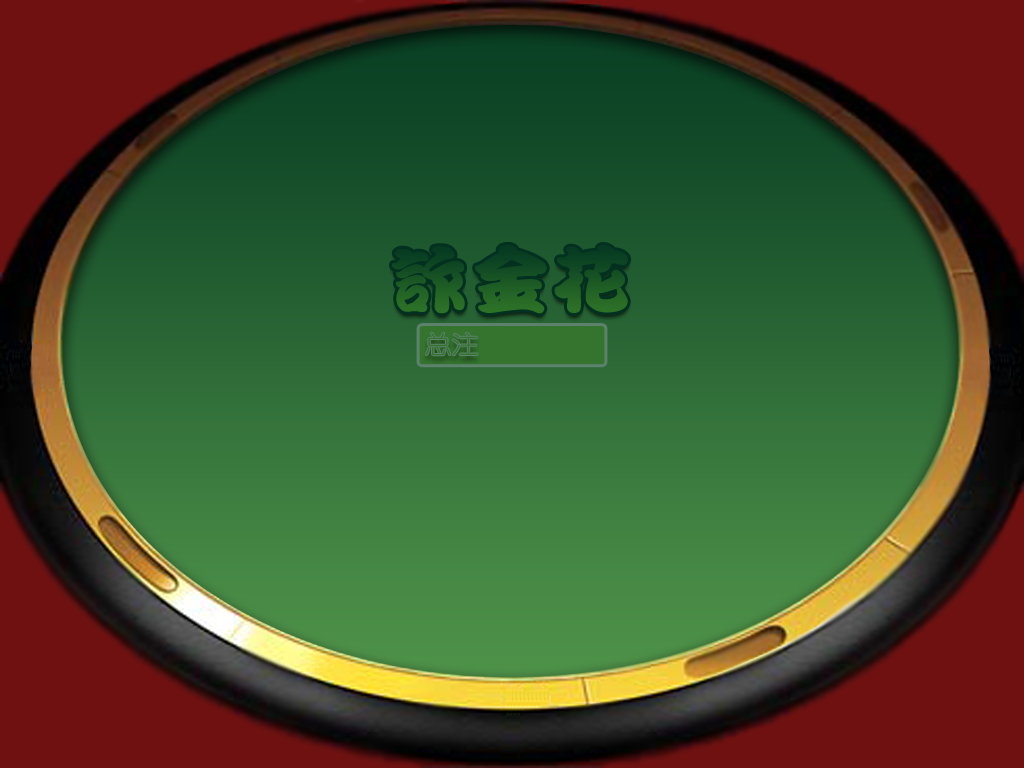
<style>
.page{position:relative;width:1024px;height:768px}
.page>*{position:absolute;margin:0}
.t1{font:72.7px "TKanTingLiu-Ultra";font-weight:bold;scale:1.09 1}
</style>
<div class="page">
<p class="t1" style="left:392px;top:245px;width:236px;height:69px">诈金花</p>
</div>
